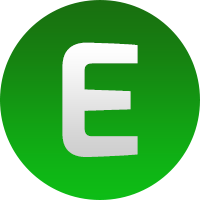
<style>
.page{position:relative;width:200px;height:200px;background:#ffffff}
.page>*{position:absolute;margin:0}
.t1{font:155.5px "Exo-Bold"}
</style>
<div class="page">
<p class="t1" style="left:62px;top:42px;width:76px;height:115px">E</p>
</div>
